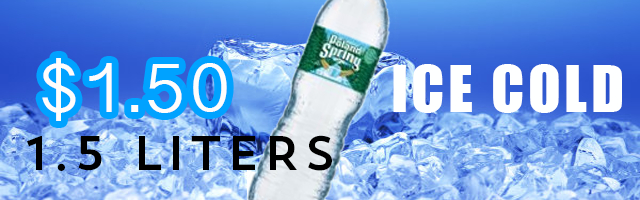
<style>
.page{position:relative;width:640px;height:200px}
.page>*{position:absolute;margin:0}
.t1{font:72.3px "GurmukhiSangamMN";letter-spacing:0.06em;color:#fffcfc;text-transform:uppercase}
.t2{font:60px "Impact";letter-spacing:0.06em;color:#feffff;text-transform:uppercase}
.t3{font:48px "TrendSansOne";letter-spacing:0.06em;color:#000000;text-transform:uppercase}
</style>
<div class="page">
<p class="t1" style="left:42px;top:58px;width:185px;height:63px">$1.50</p>
<p class="t2" style="left:393px;top:64px;width:229px;height:49px">ICE COLD</p>
<p class="t3" style="left:27px;top:135px;width:305px;height:36px">1.5 LITERS</p>
</div>
